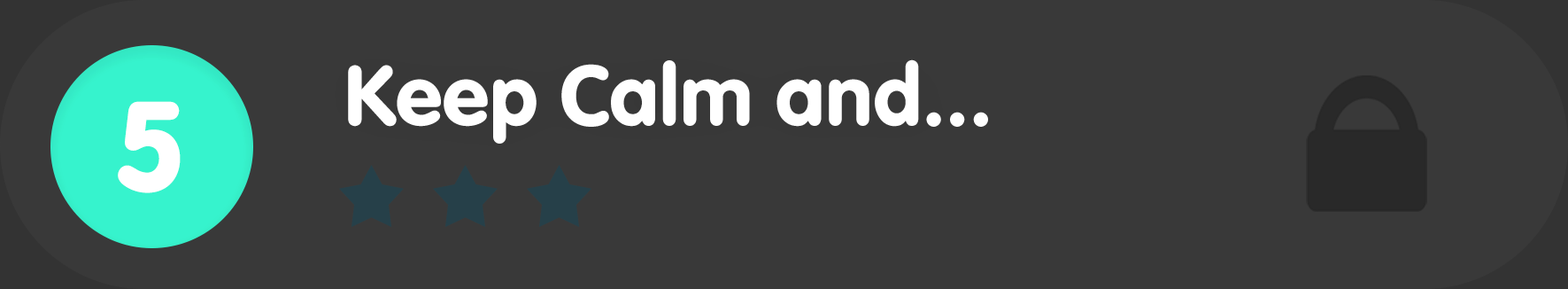
<style>
.page{position:relative;width:1568px;height:289px;background:#393939}
.page>*{position:absolute;margin:0}
.t1{font:88.5px "VAGRundschriftD";color:#ffffff}
.t2{font:132.8px "VAGRundschriftD";color:#ffffff}
</style>
<div class="page">
<p class="t1" style="left:348px;top:59px;width:640px;height:84px">Keep Calm and...</p>
<p class="t2" style="left:118px;top:101px;width:63px;height:92px">5</p>
</div>
